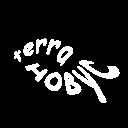
<style>
.page{position:relative;width:128px;height:128px;background:#000000}
.page>*{position:absolute;margin:0}
.t1{font:18px "ComicSansMS";letter-spacing:0.025em;color:#ffffff}
</style>
<div class="page">
<p class="t1" style="left:14px;top:38px;width:59px;height:28px">terra</p>
<p class="t1" style="left:25px;top:60px;width:95px;height:43px">новус</p>
</div>
